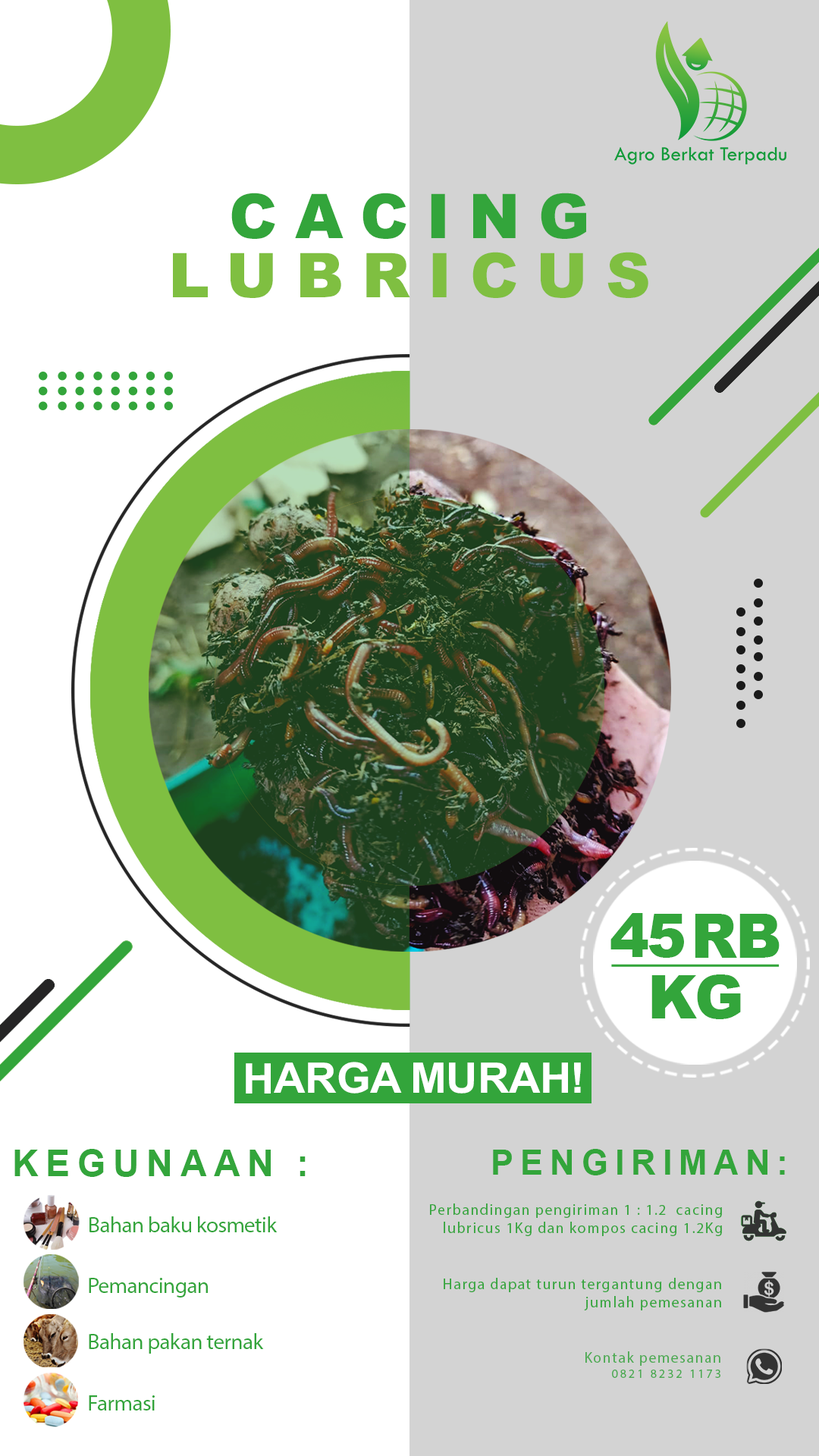
<style>
.page{position:relative;width:819px;height:1456px;background:#ffffff}
.page>*{position:absolute;margin:0}
.t1{font:61.7px/59.1px "Arial-Black";letter-spacing:0.26em;color:#7fbf41;text-transform:uppercase}
.t2{font:61.7px/59.1px "Arial-Black";letter-spacing:0.26em;color:#33a53b;text-transform:uppercase}
.t3{font:60.7px "Arial-Black";letter-spacing:-0.04em;color:#33a53b;text-transform:uppercase}
.t4{font:61.1px "Arial-Black";letter-spacing:-0.06em;color:#33a53b;text-transform:uppercase;scale:0.97 1}
.t5{font:60.4px "Arial-Black";letter-spacing:-0.04em;color:#33a53b;text-transform:uppercase}
.t6{font:42.2px "Arial-BoldMT";letter-spacing:-0.04em;color:#ffffff;text-transform:uppercase;scale:1.03 1}
.t7{font:36.9px "Arial-BoldMT";letter-spacing:0.16em;color:#33a53b;text-transform:uppercase}
.t8{font:34.5px "Arial-BoldMT";letter-spacing:0.16em;color:#33a53b;text-transform:uppercase}
.t9{font:15.2px "MyriadPro-Regular";letter-spacing:0.08em;color:#33a53b}
.t10{font:22.1px "MyriadPro-Regular";letter-spacing:-0.02em;color:#33a53b}
.t11{font:15.2px/15.2px "MyriadPro-Regular";letter-spacing:0.08em;color:#33a53b}
.t12{font:12.5px/15.2px "MyriadPro-Regular";letter-spacing:0.18em;color:#33a53b}
</style>
<div class="page">
<p class="t1" style="left:173px;top:193px;width:475px;height:105px;text-align:center"><span class="t2">Cacing<br></span>lubricus</p>
<p class="t3" style="left:610px;top:913px;width:74px;height:45px">45</p>
<p class="t4" style="left:695px;top:914px;width:85px;height:44px">rb</p>
<p class="t5" style="left:651px;top:974px;width:90px;height:45px">kg</p>
<p class="t6" style="left:246px;top:1062px;width:335px;height:32px">Harga murah!</p>
<p class="t7" style="left:14px;top:1149px;width:292px;height:28px">Kegunaan :</p>
<p class="t8" style="left:493px;top:1149px;width:292px;height:26px">pengiriman:</p>
<p class="t9" style="left:430px;top:1203px;width:292px;height:33px;text-align:right">Perbandingan pengiriman 1 : 1.2  cacing lubricus 1Kg dan kompos cacing 1.2Kg</p>
<p class="t10" style="left:89px;top:1216px;width:189px;height:16px">Bahan baku kosmetik</p>
<p class="t10" style="left:89px;top:1278px;width:119px;height:19px">Pemancingan</p>
<p class="t9" style="left:444px;top:1278px;width:277px;height:32px;text-align:right">Harga dapat turun tergantung dengan<br>jumlah pemesanan</p>
<p class="t10" style="left:89px;top:1333px;width:175px;height:21px">Bahan pakan ternak</p>
<p class="t11" style="left:585px;top:1351px;width:135px;height:27px;text-align:right">Kontak pemesanan<br><span class="t12">0821 8232 1173</span></p>
<p class="t10" style="left:89px;top:1395px;width:66px;height:15px">Farmasi</p>
</div>
